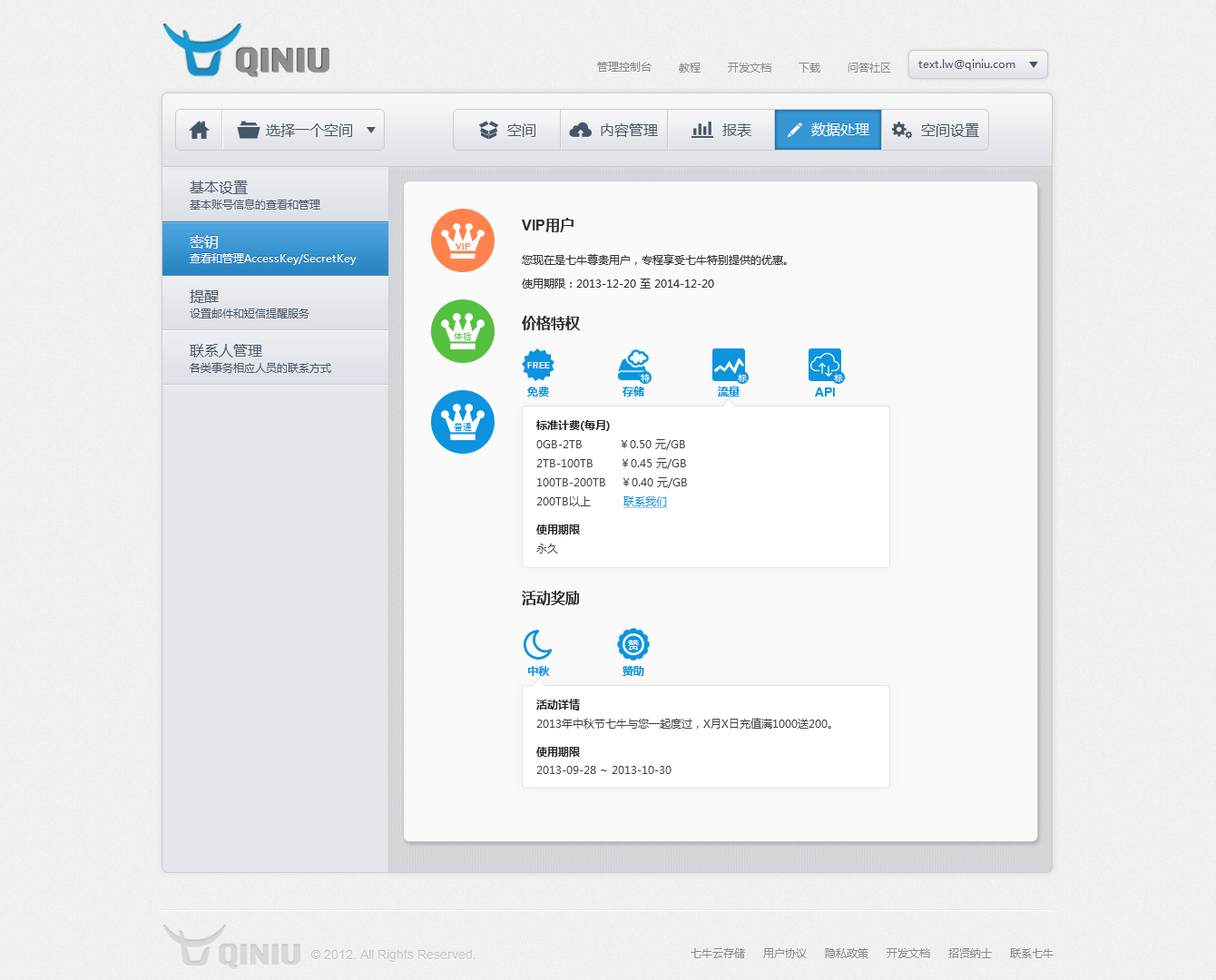
<style>
.page{position:relative;width:1216px;height:980px;background:#fafafa}
.page>*{position:absolute;margin:0}
.t1{font:10.9px "MicrosoftYaHei";color:#969696}
.t2{font:10.9px "MicrosoftYaHei";color:#465567}
.t3{font:14.5px "MicrosoftYaHei";color:#465567}
.t4{font:14.5px "MicrosoftYaHei";color:#ffffff}
.t5{font:14.5px "Arial-BoldMT";color:#323232}
.t6{font:14.5px "MicrosoftYaHei-Bold";color:#323232}
.t7{font:9.1px "Arial-BoldMT";color:#ff824d}
.t8{font:10.9px "MicrosoftYaHei";color:#ffffff}
.t9{font:10.9px "MicrosoftYaHei";color:#323232}
.t10{font:9.1px "SimHei";color:#55c03f}
.t11{font:8.2px "Arial-BoldMT";color:#ffffff}
.t12{font:9.1px "SimHei";color:#ffffff}
.t13{font:10.9px "MicrosoftYaHei-Bold";color:#0c94de}
.t14{font:12.7px "Arial-BoldMT";color:#0c94de}
.t15{font:9.1px "SimHei";color:#0c94de}
.t16{font:10.9px "MicrosoftYaHei-Bold";color:#262626}
.t17{font:10.9px "MicrosoftYaHei";color:#404040}
.t18{font:10.9px "MicrosoftYaHei";color:#0c94de;text-decoration:underline}
.t19{font:12.7px "ArialMT";color:#c5c5c5}
.t20{font:10.9px "MicrosoftYaHei";color:#878787}
</style>
<div class="page">
<p class="t1" style="left:597px;top:62px;width:55px;height:10px">管理控制台</p>
<p class="t1" style="left:679px;top:63px;width:22px;height:10px">教程</p>
<p class="t1" style="left:728px;top:63px;width:44px;height:10px">开发文档</p>
<p class="t1" style="left:799px;top:63px;width:22px;height:10px">下载</p>
<p class="t1" style="left:848px;top:63px;width:43px;height:10px">问答社区</p>
<p class="t2" style="left:919px;top:59px;width:97px;height:12px">text.lw@qiniu.com</p>
<p class="t3" style="left:266px;top:123px;width:86px;height:14px">选择一个空间</p>
<p class="t3" style="left:507px;top:123px;width:29px;height:14px">空间</p>
<p class="t3" style="left:601px;top:123px;width:57px;height:14px">内容管理</p>
<p class="t3" style="left:723px;top:123px;width:29px;height:14px">报表</p>
<p class="t4" style="left:812px;top:123px;width:58px;height:13px">数据处理</p>
<p class="t3" style="left:921px;top:123px;width:58px;height:14px">空间设置</p>
<p class="t3" style="left:190px;top:181px;width:58px;height:13px">基本设置</p>
<p class="t2" style="left:190px;top:199px;width:130px;height:11px">基本账号信息的查看和管理</p>
<p class="t5" style="left:522px;top:218px;width:52px;height:14px">VIP<span class="t6">用户</span></p>
<p class="t4" style="left:190px;top:235px;width:28px;height:14px">密钥</p>
<p class="t7" style="left:456px;top:243px;width:15px;height:7px">VIP</p>
<p class="t8" style="left:190px;top:253px;width:167px;height:12px">查看和管理AccessKey/SecretKey</p>
<p class="t9" style="left:522px;top:254px;width:265px;height:11px">您现在是七牛尊贵用户，专程享受七牛特别提供的优惠。</p>
<p class="t9" style="left:522px;top:279px;width:192px;height:10px">使用期限：2013-12-20 至 2014-12-20</p>
<p class="t3" style="left:190px;top:290px;width:29px;height:13px">提醒</p>
<p class="t2" style="left:190px;top:309px;width:120px;height:10px">设置邮件和短信提醒服务</p>
<p class="t6" style="left:522px;top:316px;width:58px;height:14px">价格特权</p>
<p class="t10" style="left:454px;top:332px;width:18px;height:8px">体验</p>
<p class="t3" style="left:190px;top:344px;width:72px;height:14px">联系人管理</p>
<p class="t2" style="left:190px;top:362px;width:141px;height:11px">各类事务相应人员的联系方式</p>
<p class="t11" style="left:527px;top:362px;width:23px;height:7px">FREE</p>
<p class="t12" style="left:641px;top:374px;width:9px;height:8px">特</p>
<p class="t12" style="left:738px;top:374px;width:9px;height:8px">标</p>
<p class="t12" style="left:834px;top:374px;width:9px;height:8px">标</p>
<p class="t13" style="left:527px;top:387px;width:22px;height:10px">免费</p>
<p class="t13" style="left:623px;top:387px;width:21px;height:10px">存储</p>
<p class="t13" style="left:718px;top:387px;width:22px;height:10px">流量</p>
<p class="t14" style="left:815px;top:388px;width:20px;height:9px">API</p>
<p class="t15" style="left:454px;top:423px;width:18px;height:8px">普通</p>
<p class="t16" style="left:536px;top:420px;width:74px;height:11px">标准计费(每月)</p>
<p class="t17" style="left:536px;top:439px;width:151px;height:69px">0GB-2TB          ￥0.50 元/GB<br>2TB-100TB      ￥0.45 元/GB<br>100TB-200TB    ￥0.40 元/GB<br>200TB以上       <span class="t18">联系我们</span></p>
<p class="t16" style="left:536px;top:525px;width:44px;height:10px">使用期限</p>
<p class="t17" style="left:536px;top:544px;width:22px;height:10px">永久</p>
<p class="t6" style="left:522px;top:591px;width:58px;height:14px">活动奖励</p>
<p class="t8" style="left:628px;top:640px;width:11px;height:10px">赞</p>
<p class="t13" style="left:528px;top:666px;width:21px;height:10px">中秋</p>
<p class="t13" style="left:623px;top:666px;width:21px;height:10px">赞助</p>
<p class="t16" style="left:536px;top:699px;width:44px;height:12px">活动详情</p>
<p class="t17" style="left:536px;top:718px;width:295px;height:11px">2013年中秋节七牛与您一起度过，X月X日充值满1000送200。</p>
<p class="t16" style="left:536px;top:747px;width:44px;height:10px">使用期限</p>
<p class="t17" style="left:536px;top:766px;width:136px;height:8px">2013-09-28 ~ 2013-10-30</p>
<p class="t19" style="left:311px;top:950px;width:165px;height:12px">© 2012. All Rights Reserved.</p>
<p class="t20" style="left:691px;top:949px;width:363px;height:10px">七牛云存储     用户协议     隐私政策     开发文档     招贤纳士     联系七牛</p>
</div>
